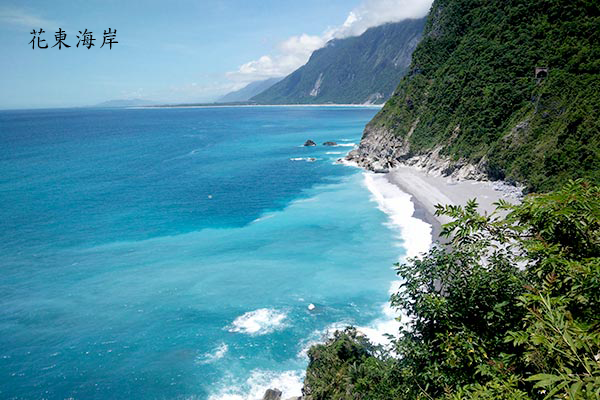
<style>
.page{position:relative;width:600px;height:400px}
.page>*{position:absolute;margin:0}
.t1{font:24px "DFKaiShu-SB-Estd-BF";color:#030000}
</style>
<div class="page">
<p class="t1" style="left:28px;top:28px;width:91px;height:22px">花東海岸</p>
</div>
